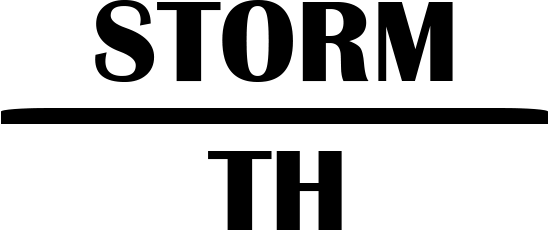
<style>
.page{position:relative;width:549px;height:230px;background:#ffffff}
.page>*{position:absolute;margin:0}
.t1{font:119.2px "BritannicBold";color:#000000}
</style>
<div class="page">
<p class="t1" style="left:95px;top:0px;width:358px;height:82px">STORM</p>
<p class="t1" style="left:208px;top:151px;width:134px;height:79px">TH</p>
</div>
